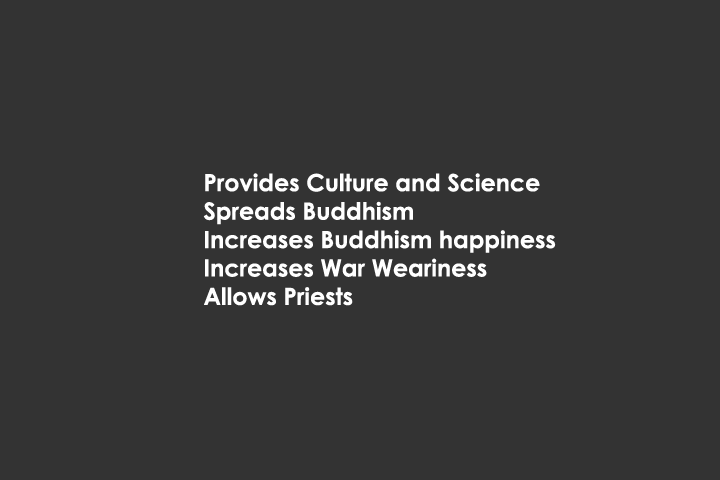
<style>
.page{position:relative;width:720px;height:480px;background:#333333}
.page>*{position:absolute;margin:0}
.t1{font:23.7px "CenturyGothic-Bold";color:#ffffff}
</style>
<div class="page">
<p class="t1" style="left:203px;top:173px;width:353px;height:133px">Provides Culture and Science<br>Spreads Buddhism<br>Increases Buddhism happiness<br>Increases War Weariness<br>Allows Priests</p>
</div>
